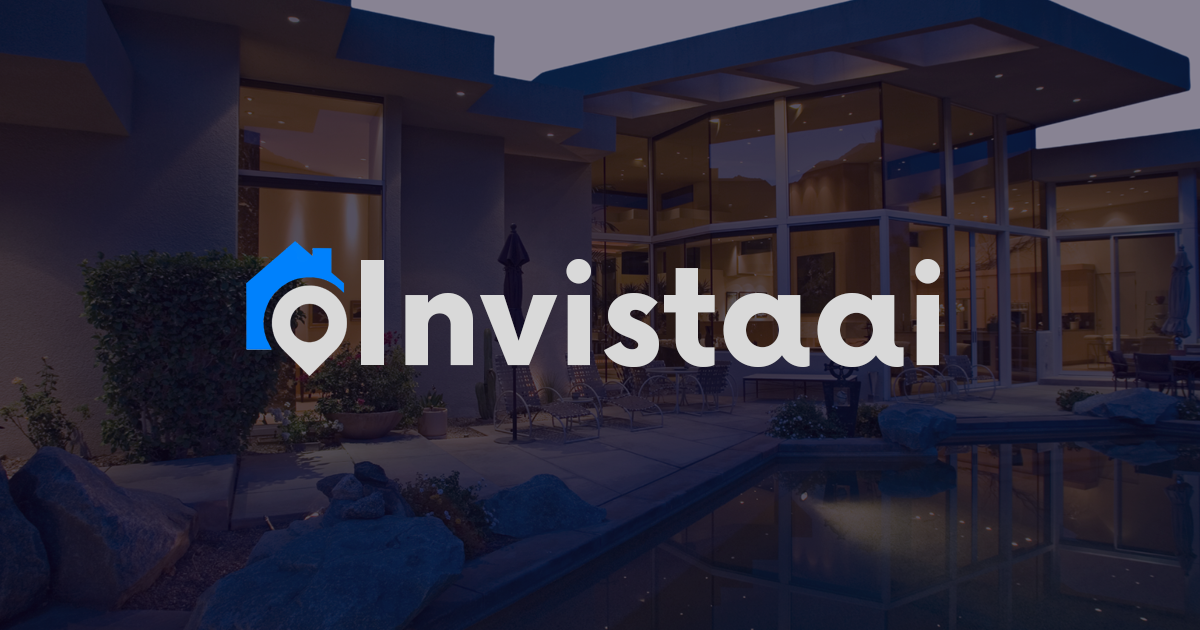
<style>
.page{position:relative;width:1200px;height:630px}
.page>*{position:absolute;margin:0}
.t1{font:140px "Now-Bold";color:#d9d9d9}
</style>
<div class="page">
<p class="t1" style="left:361px;top:259px;width:579px;height:109px">Invistaai</p>
</div>
